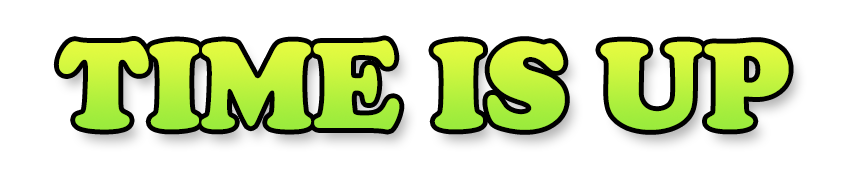
<style>
.page{position:relative;width:850px;height:170px;background:#ffffff}
.page>*{position:absolute;margin:0}
.t1{font:127.5px "CooperBlack"}
</style>
<div class="page">
<p class="t1" style="left:58px;top:40px;width:731px;height:90px">TIME IS UP</p>
</div>
